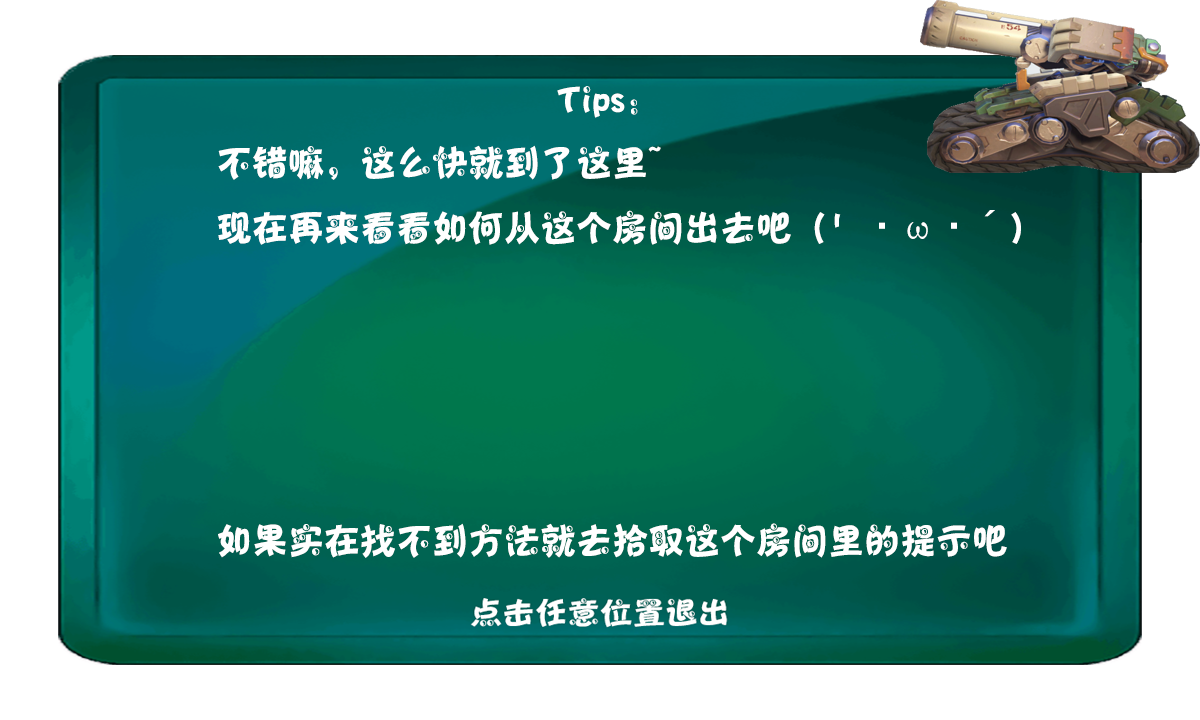
<style>
.page{position:relative;width:1200px;height:720px;background:#ffffff}
.page>*{position:absolute;margin:0}
.t1{font:36px "Jtaiji";color:#ffffff}
.t2{font:36px "MS-Gothic";color:#ffffff}
</style>
<div class="page">
<p class="t1" style="left:217px;top:86px;width:804px;height:472px;text-align:center">Tips:<br>      不错嘛，这么快就到了这里~<br>      现在再来看看如何从这个房间出去吧 (｀<span class="t2">・</span>ω<span class="t2">・´</span>)<br><br><br>      <br>      <br>      如果实在找不到方法就去拾取这个房间里的提示吧</p>
</div>
